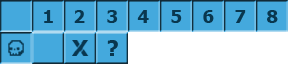
<style>
.page{position:relative;width:288px;height:64px;background:#44a9dd}
.page>*{position:absolute;margin:0}
.t1{font:18px "Tahoma-Bold";color:#09374f}
.t2{font:21px "Tahoma-Bold";color:#09374f}
</style>
<div class="page">
<p class="t1" style="left:44px;top:10px;width:9px;height:13px">1</p>
<p class="t1" style="left:74px;top:10px;width:11px;height:13px">2</p>
<p class="t1" style="left:107px;top:10px;width:11px;height:13px">3</p>
<p class="t1" style="left:137px;top:10px;width:12px;height:13px">4</p>
<p class="t1" style="left:171px;top:10px;width:11px;height:13px">5</p>
<p class="t1" style="left:203px;top:10px;width:11px;height:13px">6</p>
<p class="t1" style="left:235px;top:10px;width:11px;height:13px">7</p>
<p class="t1" style="left:267px;top:10px;width:11px;height:13px">8</p>
<p class="t2" style="left:107px;top:40px;width:11px;height:16px">?</p>
</div>
